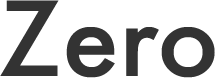
<style>
.page{position:relative;width:215px;height:78px;background:#ffffff}
.page>*{position:absolute;margin:0}
.t1{font:100px "Futura-Medium";color:#333333;scale:1.04 1}
</style>
<div class="page">
<p class="t1" style="left:0px;top:0px;width:215px;height:78px">Zero</p>
</div>
